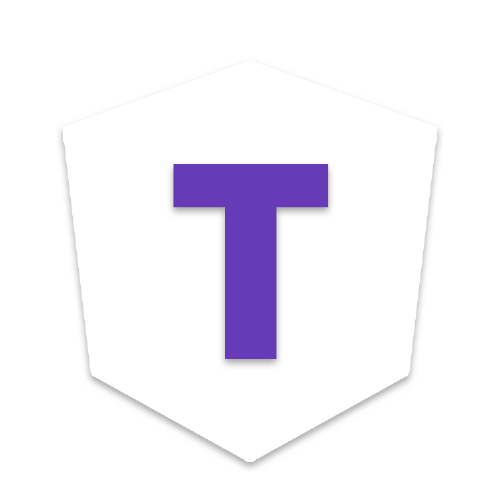
<style>
.page{position:relative;width:500px;height:500px;background:#ffffff}
.page>*{position:absolute;margin:0}
.t1{font:300px "SourceSansPro-Black";color:#673ab7}
</style>
<div class="page">
<p class="t1" style="left:173px;top:164px;width:156px;height:195px">T</p>
</div>
